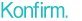
<style>
.page{position:relative;width:82px;height:21px;background:#ffffff}
.page>*{position:absolute;margin:0}
.t1{font:20px "GothicMB101Pro-Regular";letter-spacing:-0.06em;color:#1dbcc0;scale:0.9 1}
</style>
<div class="page">
<p class="t1" style="left:1px;top:1px;width:67px;height:17px">Konfirm.</p>
</div>
